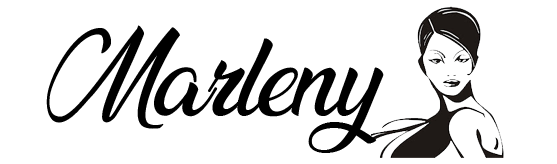
<style>
.page{position:relative;width:557px;height:164px;background:#ffffff}
.page>*{position:absolute;margin:0}
.t1{font:96px "Ananda";letter-spacing:-0.05em;color:#000000}
</style>
<div class="page">
<p class="t1" style="left:46px;top:25px;width:338px;height:128px">Marleny</p>
</div>
